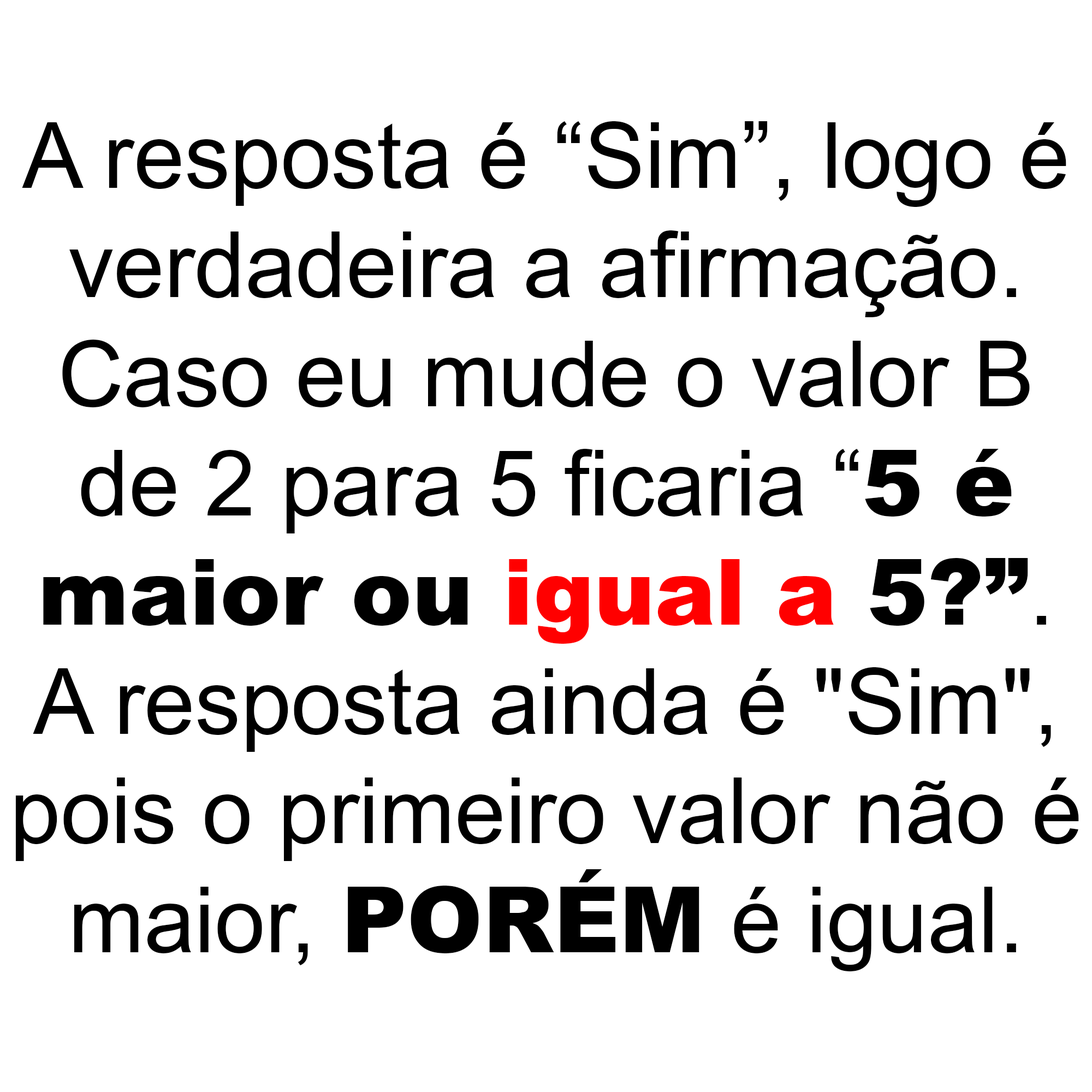
<style>
.page{position:relative;width:1092px;height:1092px;background:#ffffff}
.page>*{position:absolute;margin:0}
.t1{font:91px "ArialMT";color:#000000}
.t2{font:91px "Arial-Black";color:#000000}
.t3{font:91px "Arial-Black";color:#ff0000}
</style>
<div class="page">
<p class="t1" style="left:15px;top:121px;width:1064px;height:850px;text-align:center">A resposta é “Sim”, logo é<br>verdadeira a afirmação.<br>Caso eu mude o valor B<br>de 2 para 5 ficaria “<span class="t2">5 é<br>maior ou </span><span class="t3">igual a</span><span class="t2"> 5?”</span>.<br>A resposta ainda é "Sim",<br>pois o primeiro valor não é<br>maior, <span class="t2">PORÉM</span> é igual.</p>
</div>
